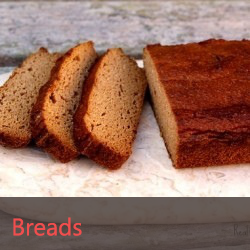
<style>
.page{position:relative;width:250px;height:250px}
.page>*{position:absolute;margin:0}
.t1{font:24px "MicrosoftTaiLe";color:#f14e4e}
</style>
<div class="page">
<p class="t1" style="left:13px;top:217px;width:69px;height:19px">Breads</p>
</div>
